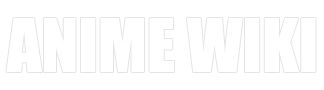
<style>
.page{position:relative;width:324px;height:90px;background:#ffffff}
.page>*{position:absolute;margin:0}
.t1{font:68.1px "Impact";color:#ffffff}
</style>
<div class="page">
<p class="t1" style="left:6px;top:18px;width:310px;height:54px">ANIME WIKI</p>
</div>
